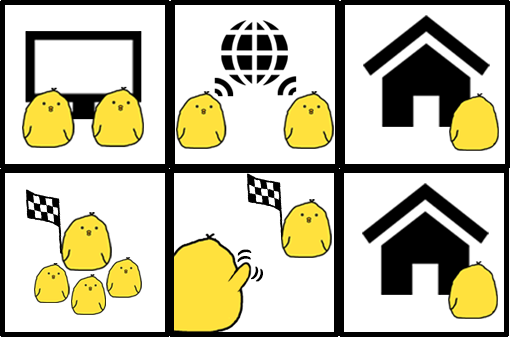
<style>
.page{position:relative;width:510px;height:338px;background:#ffffff}
.page>*{position:absolute;margin:0}
.t1{font:14.1px "rounded-x-mplus-1p-black";color:#000000}
.t2{font:13.8px "rounded-x-mplus-1p-black";color:#000000}
</style>
<div class="page">
<p class="t1" style="left:237px;top:256px;width:14px;height:7px;rotate:78deg">(</p>
<p class="t1" style="left:237px;top:249px;width:15px;height:7px;rotate:78deg">(</p>
<p class="t2" style="left:251px;top:266px;width:8px;height:14px;rotate:-159deg">(</p>
<p class="t2" style="left:255px;top:268px;width:8px;height:14px;rotate:-159deg">(</p>
</div>
